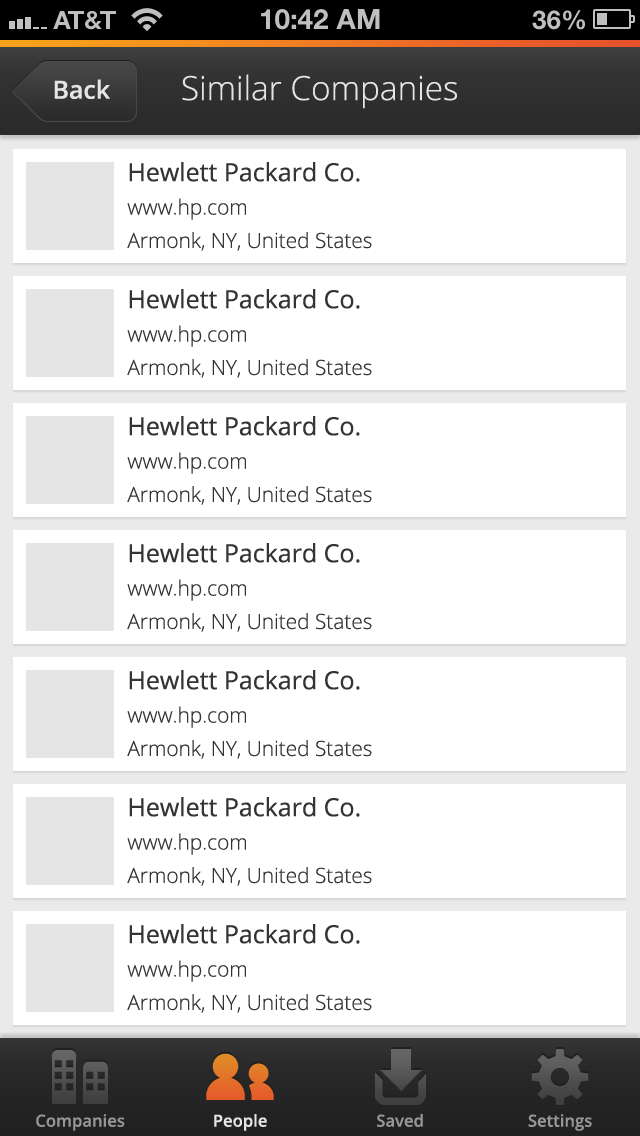
<style>
.page{position:relative;width:640px;height:1136px;background:#ffffff}
.page>*{position:absolute;margin:0}
.t1{font:33.3px "OpenSans-Light";color:#e5e5e5}
.t2{font:25px "OpenSans-Semibold";color:#e5e5e5}
.t3{font:20.8px "OpenSans-Light";color:#343434}
.t4{font:25px "OpenSans";color:#343434}
.t5{font:16.7px "OpenSans-Semibold";color:#969696}
.t6{font:16.7px "OpenSans-Semibold";color:#e5e5e5}
</style>
<div class="page">
<p class="t1" style="left:182px;top:74px;width:275px;height:35px">Similar Companies</p>
<p class="t2" style="left:54px;top:79px;width:57px;height:20px">Back</p>
<p class="t3" style="left:127px;top:162px;width:245px;height:89px"><span class="t4">Hewlett Packard Co.<br></span>www.hp.com<br>Armonk, NY, United States</p>
<p class="t3" style="left:127px;top:289px;width:245px;height:89px"><span class="t4">Hewlett Packard Co.<br></span>www.hp.com<br>Armonk, NY, United States</p>
<p class="t3" style="left:127px;top:416px;width:245px;height:89px"><span class="t4">Hewlett Packard Co.<br></span>www.hp.com<br>Armonk, NY, United States</p>
<p class="t3" style="left:127px;top:543px;width:245px;height:89px"><span class="t4">Hewlett Packard Co.<br></span>www.hp.com<br>Armonk, NY, United States</p>
<p class="t3" style="left:127px;top:670px;width:245px;height:89px"><span class="t4">Hewlett Packard Co.<br></span>www.hp.com<br>Armonk, NY, United States</p>
<p class="t3" style="left:127px;top:797px;width:245px;height:89px"><span class="t4">Hewlett Packard Co.<br></span>www.hp.com<br>Armonk, NY, United States</p>
<p class="t3" style="left:127px;top:924px;width:245px;height:89px"><span class="t4">Hewlett Packard Co.<br></span>www.hp.com<br>Armonk, NY, United States</p>
<p class="t5" style="left:36px;top:1114px;width:89px;height:17px">Companies</p>
<p class="t6" style="left:214px;top:1114px;width:53px;height:17px">People</p>
<p class="t5" style="left:377px;top:1114px;width:46px;height:13px">Saved</p>
<p class="t5" style="left:528px;top:1114px;width:64px;height:17px">Settings</p>
</div>
